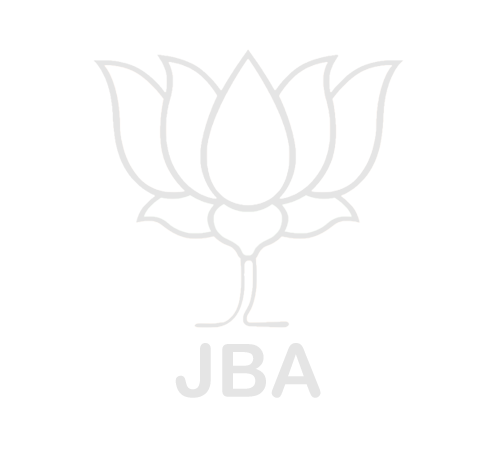
<style>
.page{position:relative;width:500px;height:476px;background:#ffffff}
.page>*{position:absolute;margin:0}
.t1{font:73.6px "ArialRoundedMTBold";color:#e5e5e5}
</style>
<div class="page">
<p class="t1" style="left:175px;top:343px;width:146px;height:55px">JBA</p>
</div>
